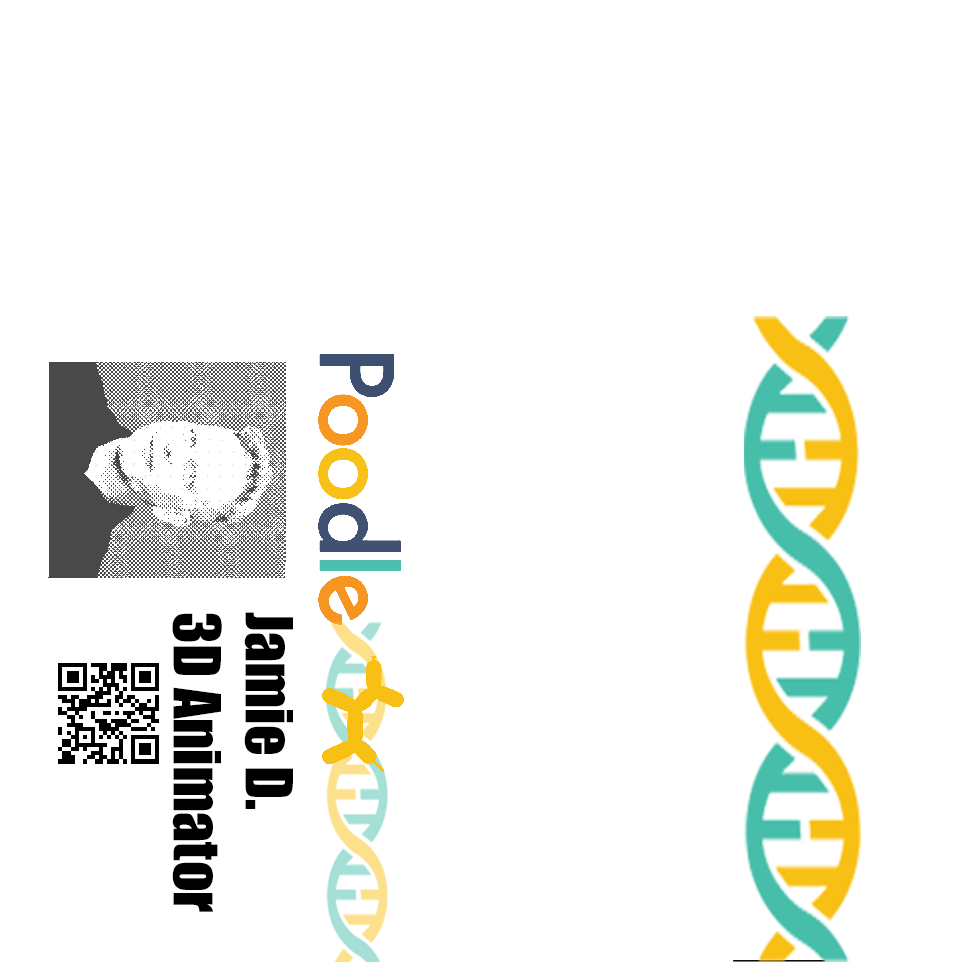
<style>
.page{position:relative;width:960px;height:962px;background:#ffffff}
.page>*{position:absolute;margin:0}
.t1{font:60px "Impact";color:#000000}
</style>
<div class="page">
<p class="t1" style="left:172px;top:612px;width:121px;height:300px;rotate:90deg">Jamie D.<br>3D Animator</p>
</div>
